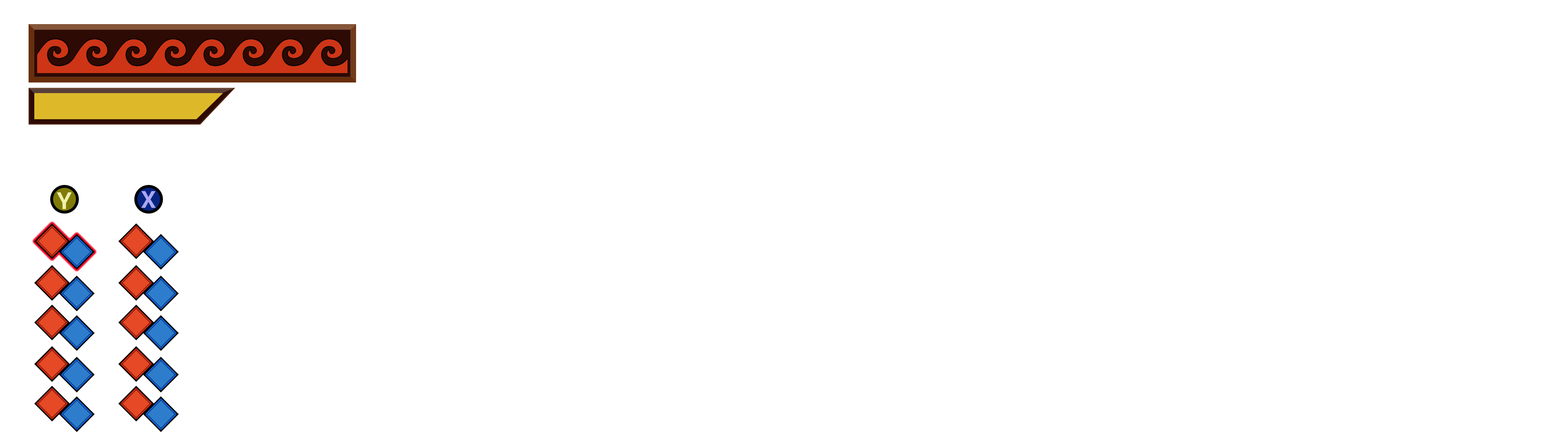
<style>
.page{position:relative;width:1568px;height:441px;background:#ffffff}
.page>*{position:absolute;margin:0}
.t1{font:23.8px "Roboto-Bold";color:#eff1ab}
.t2{font:23.8px "Roboto-Bold";color:#a8a8f2}
</style>
<div class="page">
<p class="t1" style="left:57px;top:192px;width:15px;height:17px">Y</p>
<p class="t2" style="left:141px;top:191px;width:15px;height:17px">X</p>
</div>
